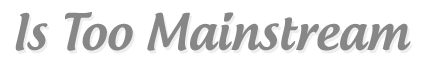
<style>
.page{position:relative;width:425px;height:60px;background:#ffffff}
.page>*{position:absolute;margin:0}
.t1{font:48px "AndrogyneMedium";color:#878787}
</style>
<div class="page">
<p class="t1" style="left:15px;top:12px;width:396px;height:39px">Is Too Mainstream</p>
</div>
